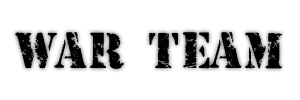
<style>
.page{position:relative;width:300px;height:100px;background:#ffffff}
.page>*{position:absolute;margin:0}
.t1{font:45px "CBX-Armymen";letter-spacing:0.005em;color:#000000}
</style>
<div class="page">
<p class="t1" style="left:15px;top:32px;width:267px;height:37px">WAR TEAM</p>
</div>
